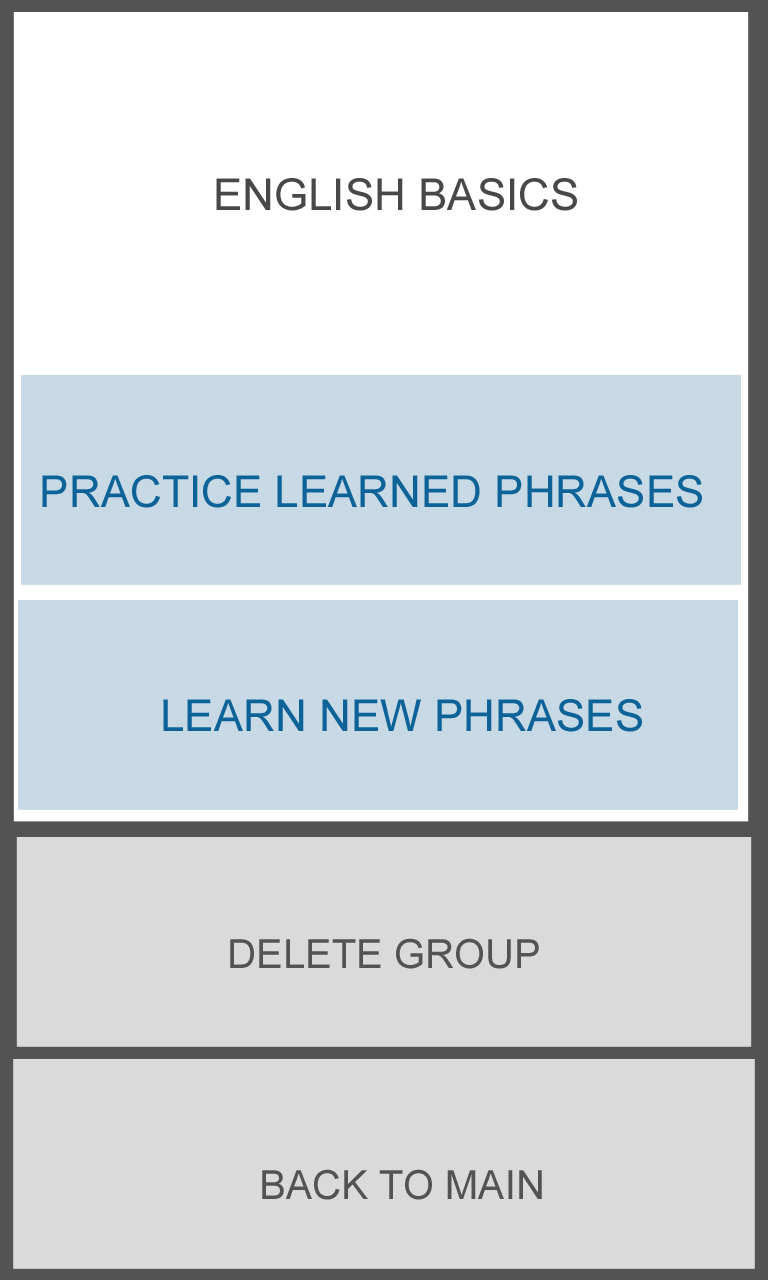
<style>
.page{position:relative;width:768px;height:1280px;background:#ffffff}
.page>*{position:absolute;margin:0}
.t1{font:44px "ArialMT";color:#484848}
.t2{font:44px "ArialMT";color:#0d6298}
.t3{font:40px "ArialMT";color:#535353}
</style>
<div class="page">
<p class="t1" style="left:216px;top:178px;width:361px;height:33px">ENGLISH BASICS</p>
<p class="t2" style="left:42px;top:475px;width:660px;height:33px">PRACTICE LEARNED PHRASES</p>
<p class="t2" style="left:163px;top:699px;width:479px;height:33px">LEARN NEW PHRASES</p>
<p class="t3" style="left:230px;top:938px;width:309px;height:31px">DELETE GROUP</p>
<p class="t3" style="left:262px;top:1169px;width:280px;height:31px">BACK TO MAIN</p>
</div>
